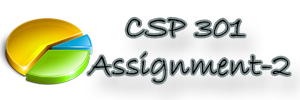
<style>
.page{position:relative;width:300px;height:100px;background:#ffffff}
.page>*{position:absolute;margin:0}
.t1{font:32px "BradleyHandITC";letter-spacing:0.01em;color:#000000}
</style>
<div class="page">
<p class="t1" style="left:88px;top:18px;width:202px;height:65px;text-align:center">CSP 301<br> Assignment-2</p>
</div>
